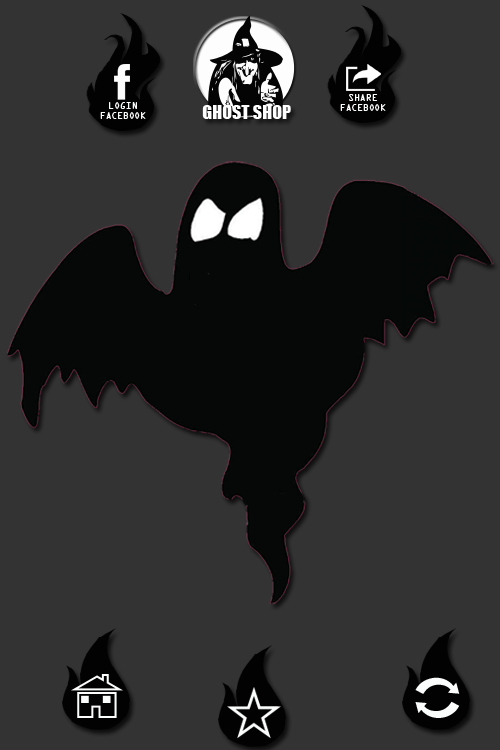
<style>
.page{position:relative;width:500px;height:750px;background:#333333}
.page>*{position:absolute;margin:0}
.t1{font:8px "OCRAStd";color:#fbfcfc}
.t2{font:18px "Impact";color:#fdfdfd}
</style>
<div class="page">
<p class="t1" style="left:100px;top:102px;width:46px;height:17px;text-align:center">LOGIN<br>FACEBOOK</p>
<p class="t1" style="left:340px;top:94px;width:46px;height:17px;text-align:center">SHARE<br>FACEBOOK</p>
<p class="t2" style="left:202px;top:105px;width:89px;height:14px">GHOST SHOP</p>
</div>
